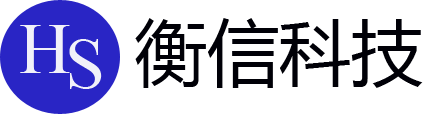
<style>
.page{position:relative;width:423px;height:114px;background:#ffffff}
.page>*{position:absolute;margin:0}
.t1{font:72px "TimesNewRomanPSMT";color:#f1f1f9}
.t2{font:72px "MicrosoftYaHei";color:#010007}
</style>
<div class="page">
<p class="t1" style="left:20px;top:25px;width:50px;height:48px">H</p>
<p class="t2" style="left:135px;top:18px;width:288px;height:70px">衡信科技</p>
<p class="t1" style="left:69px;top:39px;width:33px;height:50px">S</p>
</div>
